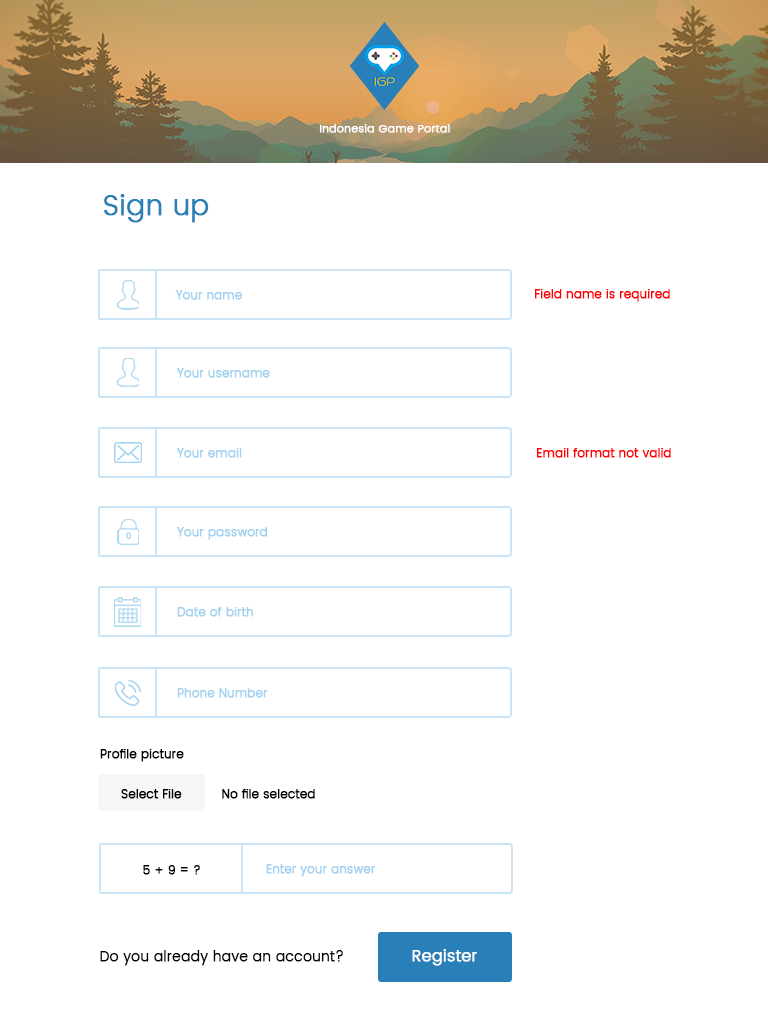
<style>
.page{position:relative;width:768px;height:1024px;background:#ffffff}
.page>*{position:absolute;margin:0}
.t1{font:11.2px "Poppins-Light";color:#ffffff;font-weight:bold}
.t2{font:28px "Poppins-Light";color:#2980b9;font-weight:bold}
.t3{font:12px "Poppins-Light";color:#a4d2f0;font-weight:bold}
.t4{font:12px "Poppins-Light";color:#ff0000;font-weight:bold}
.t5{font:12px "Poppins-Light";color:#000000;font-weight:bold}
.t6{font:14px "Poppins-Light";color:#000000;font-weight:bold}
.t7{font:16px "Poppins-Light";color:#ffffff;font-weight:bold}
</style>
<div class="page">
<p class="t1" style="left:320px;top:124px;width:130px;height:9px">Indonesia Game Portal</p>
<p class="t2" style="left:104px;top:194px;width:105px;height:29px">Sign up</p>
<p class="t3" style="left:175px;top:290px;width:67px;height:10px">Your name</p>
<p class="t4" style="left:535px;top:289px;width:135px;height:13px">Field name is required</p>
<p class="t3" style="left:177px;top:368px;width:93px;height:10px">Your username</p>
<p class="t3" style="left:177px;top:448px;width:65px;height:10px">Your email</p>
<p class="t4" style="left:537px;top:448px;width:134px;height:10px">Email format not valid</p>
<p class="t3" style="left:177px;top:527px;width:90px;height:13px">Your password</p>
<p class="t3" style="left:177px;top:607px;width:76px;height:10px">Date of birth</p>
<p class="t3" style="left:177px;top:688px;width:91px;height:10px">Phone Number</p>
<p class="t5" style="left:100px;top:749px;width:84px;height:13px">Profile picture</p>
<p class="t5" style="left:121px;top:789px;width:61px;height:10px">Select File</p>
<p class="t5" style="left:222px;top:789px;width:93px;height:10px">No file selected</p>
<p class="t5" style="left:143px;top:865px;width:57px;height:10px">5 + 9 = ?</p>
<p class="t3" style="left:266px;top:864px;width:109px;height:13px">Enter your answer</p>
<p class="t6" style="left:100px;top:950px;width:243px;height:16px">Do you already have an account?</p>
<p class="t7" style="left:412px;top:949px;width:65px;height:17px">Register</p>
</div>
